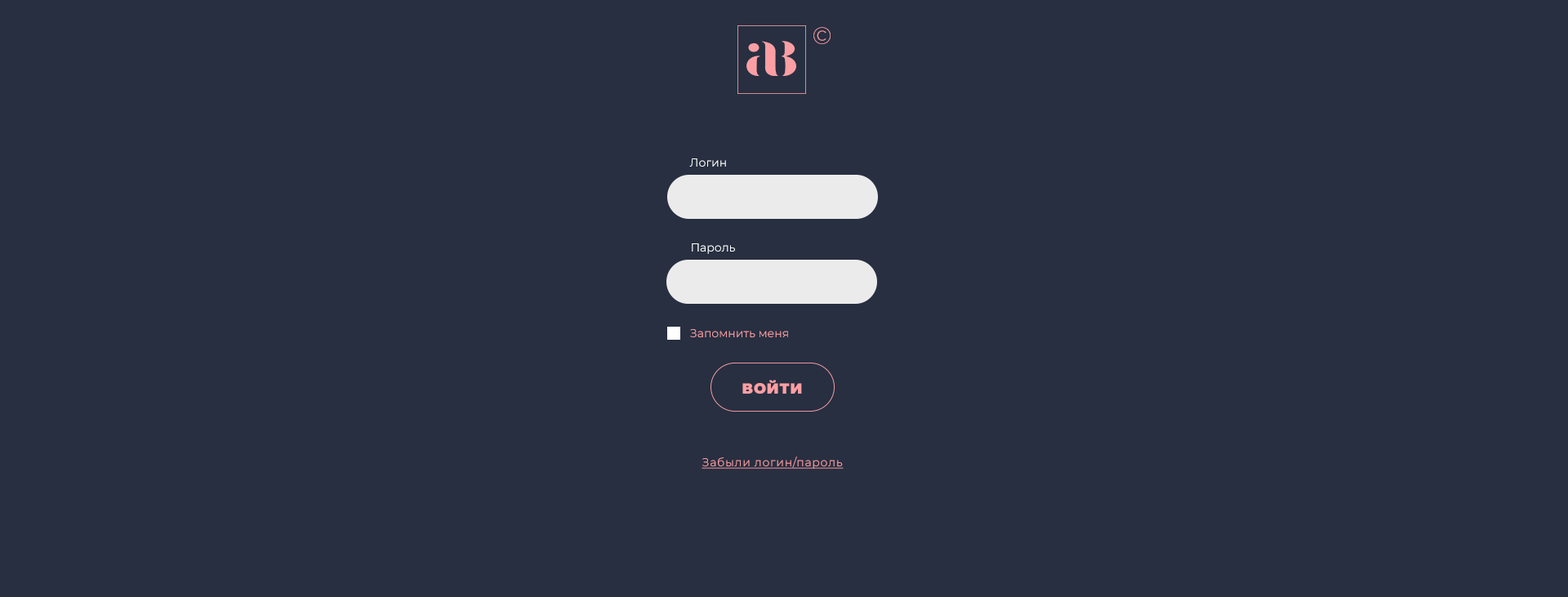
<style>
.page{position:relative;width:1568px;height:597px;background:#272f41}
.page>*{position:absolute;margin:0}
.t1{font:24px "Montserrat-Light";letter-spacing:0.025em;color:#fb9fa4}
.t2{font:11.4px "Montserrat-Regular";color:#ffffff}
.t3{font:11.4px "Montserrat-Regular";color:#fb9fa4}
.t4{font:14.7px "Montserrat-Black";letter-spacing:0.05em;color:#fb9fa4;text-transform:uppercase}
.t5{font:11.4px "Montserrat-Regular";letter-spacing:0.05em;color:#fb9fa4;text-decoration:underline}
</style>
<div class="page">
<p class="t1" style="left:813px;top:27px;width:18px;height:17px">©</p>
<p class="t2" style="left:689px;top:158px;width:37px;height:9px">Логин</p>
<p class="t2" style="left:692px;top:243px;width:43px;height:11px">Пароль</p>
<p class="t3" style="left:690px;top:329px;width:98px;height:8px">Запомнить меня</p>
<p class="t4" style="left:742px;top:380px;width:60px;height:14px">Войти</p>
<p class="t5" style="left:702px;top:457px;width:142px;height:12px">Забыли логин/пароль</p>
</div>
